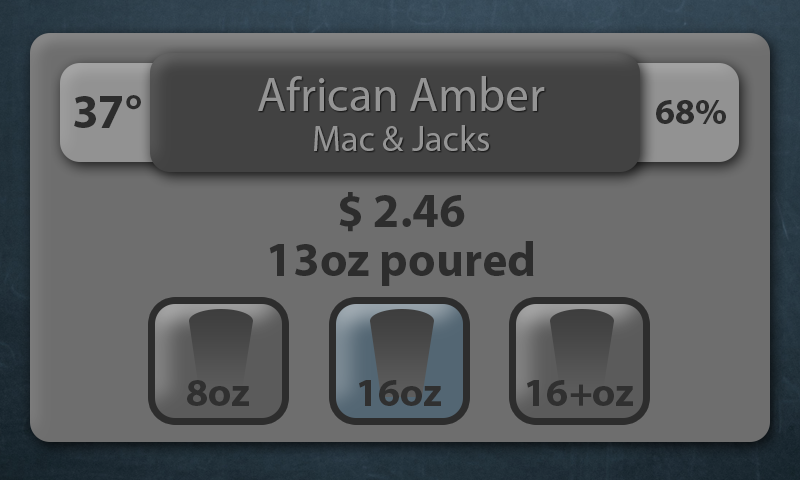
<style>
.page{position:relative;width:800px;height:480px;background:#6e6e6e}
.page>*{position:absolute;margin:0}
.t1{font:48px "MyriadPro-Regular";color:#949494}
.t2{font:48px "MyriadPro-Bold";color:#2d2d2d}
.t3{font:36px "MyriadPro-Bold";color:#2d2d2d}
.t4{font:36px "MyriadPro-Regular";color:#949494}
.t5{font:40px "MyriadPro-Bold";color:#303030}
</style>
<div class="page">
<p class="t1" style="left:258px;top:76px;width:287px;height:35px">African Amber</p>
<p class="t2" style="left:74px;top:95px;width:67px;height:33px">37°</p>
<p class="t3" style="left:656px;top:100px;width:70px;height:24px">68%</p>
<p class="t4" style="left:314px;top:125px;width:175px;height:26px">Mac &amp; Jacks</p>
<p class="t2" style="left:339px;top:192px;width:126px;height:40px">$ 2.46</p>
<p class="t2" style="left:269px;top:241px;width:265px;height:45px">13oz poured</p>
<p class="t5" style="left:187px;top:380px;width:62px;height:26px">8oz</p>
<p class="t5" style="left:359px;top:380px;width:82px;height:26px">16oz</p>
<p class="t5" style="left:527px;top:380px;width:106px;height:26px">16+oz</p>
</div>
